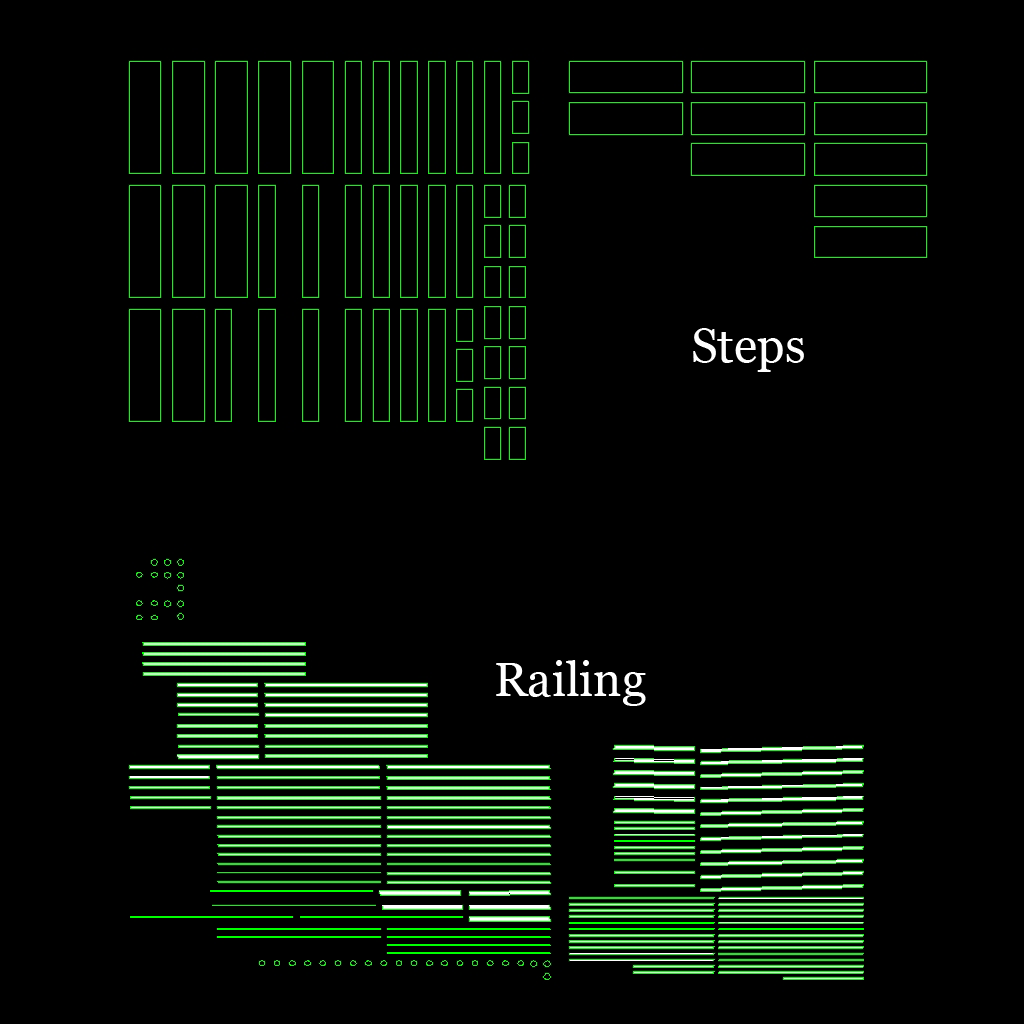
<style>
.page{position:relative;width:1024px;height:1024px;background:#000000}
.page>*{position:absolute;margin:0}
.t1{font:48px "Georgia";color:#ffffff}
</style>
<div class="page">
<p class="t1" style="left:693px;top:328px;width:111px;height:44px">Steps</p>
<p class="t1" style="left:496px;top:660px;width:150px;height:46px">Railing</p>
</div>
